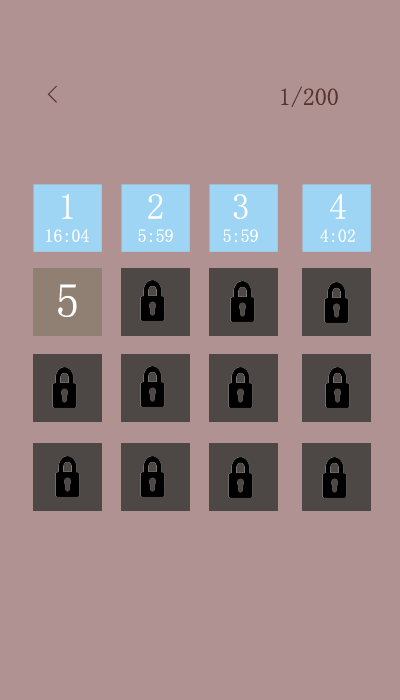
<style>
.page{position:relative;width:400px;height:700px;background:#b09292}
.page>*{position:absolute;margin:0}
.t1{font:24px "SimSun";color:#5a3131}
.t2{font:36px "SimSun";color:#ffffff}
.t3{font:18px "SimSun";color:#ffffff}
.t4{font:48px "SimSun";color:#ffffff}
</style>
<div class="page">
<p class="t1" style="left:47px;top:85px;width:10px;height:18px">&lt;</p>
<p class="t1" style="left:281px;top:86px;width:57px;height:21px">1/200</p>
<p class="t2" style="left:148px;top:194px;width:15px;height:25px">2</p>
<p class="t2" style="left:233px;top:194px;width:15px;height:25px">3</p>
<p class="t2" style="left:330px;top:194px;width:16px;height:25px">4</p>
<p class="t3" style="left:138px;top:229px;width:35px;height:13px">5:59</p>
<p class="t3" style="left:223px;top:229px;width:35px;height:13px">5:59</p>
<p class="t3" style="left:320px;top:229px;width:35px;height:13px">4:02</p>
<p class="t4" style="left:58px;top:284px;width:19px;height:33px">5</p>
</div>
